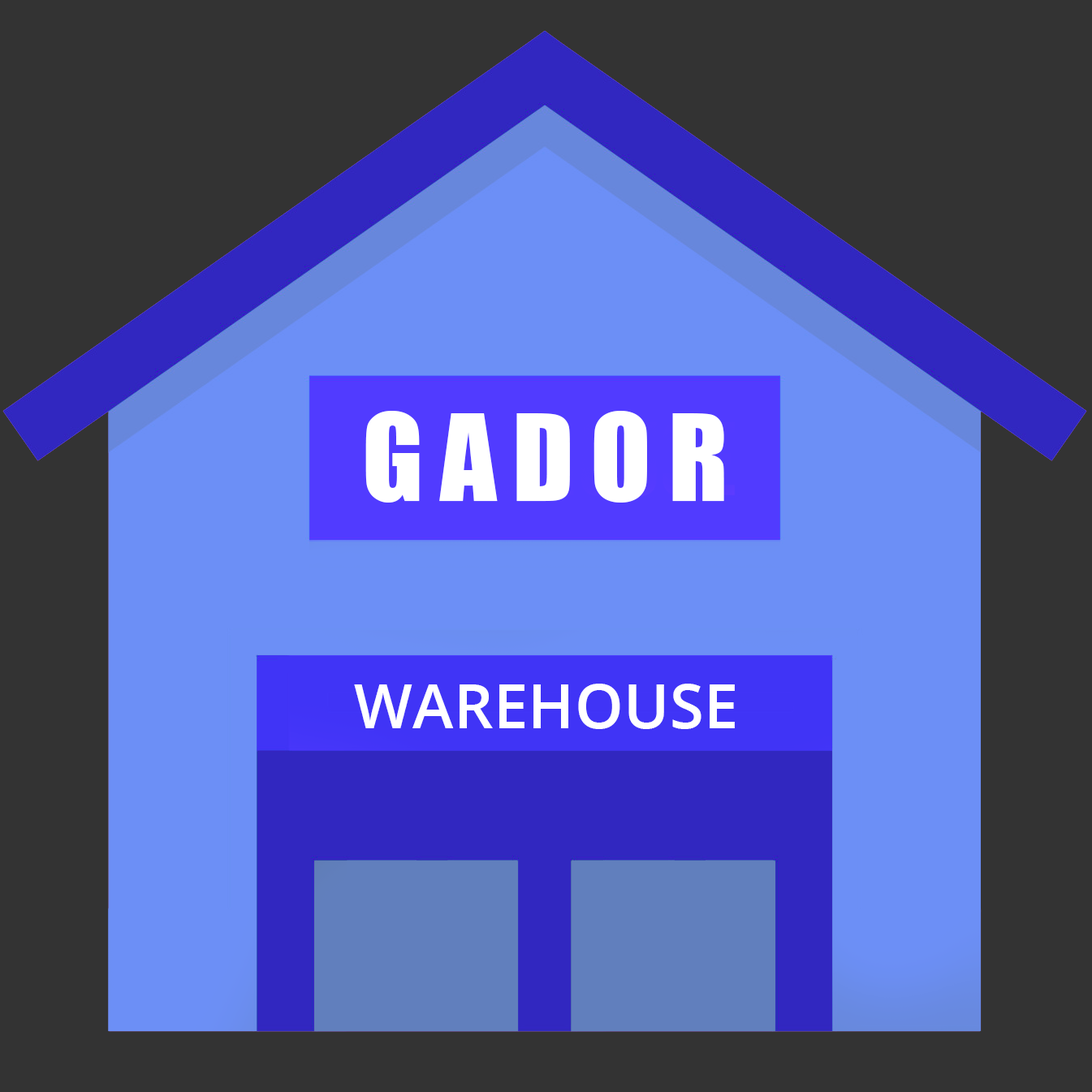
<style>
.page{position:relative;width:1092px;height:1092px;background:#333333}
.page>*{position:absolute;margin:0}
.t1{font:110.9px "Impact";letter-spacing:0.15em;color:#ffffff}
.t2{font:62.1px "OpenSans-Semibold";color:#ffffff}
</style>
<div class="page">
<p class="t1" style="left:365px;top:411px;width:359px;height:92px">GADOR</p>
<p class="t2" style="left:354px;top:684px;width:381px;height:45px">WAREHOUSE</p>
</div>
